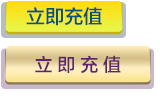
<style>
.page{position:relative;width:160px;height:97px;background:#ffffff}
.page>*{position:absolute;margin:0}
.t1{font:19.2px "FZLTZHK--GBK1-0";color:#0a527b;text-transform:uppercase}
.t2{font:18.5px "FZLTZHK--GBK1-0";color:#5f256d;text-transform:uppercase;scale:0.97 1}
</style>
<div class="page">
<p class="t1" style="left:26px;top:7px;width:76px;height:19px">立即充值</p>
<p class="t2" style="left:35px;top:55px;width:86px;height:18px">立 即 充 值</p>
</div>
